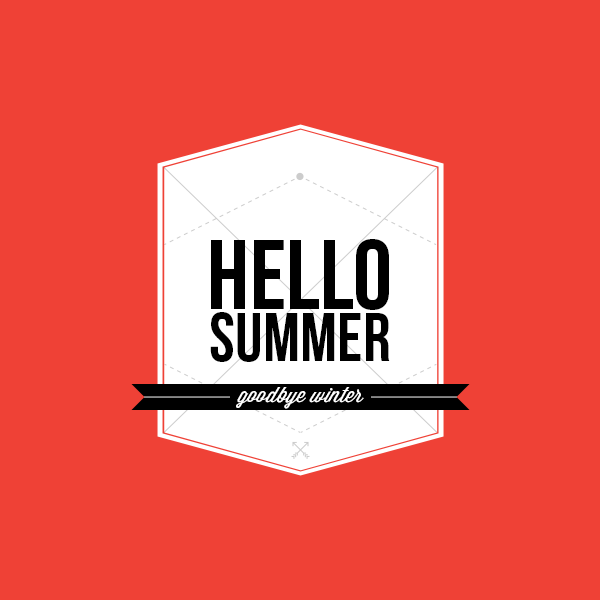
<style>
.page{position:relative;width:600px;height:600px;background:#ef4136}
.page>*{position:absolute;margin:0}
.t1{font:99px "BebasNeue";color:#000000}
.t2{font:69px "BebasNeue";color:#000000}
.t3{font:21px "WisdomScriptAI";color:#ffffff}
</style>
<div class="page">
<p class="t1" style="left:211px;top:239px;width:178px;height:71px">HELLO</p>
<p class="t2" style="left:210px;top:312px;width:180px;height:50px">SUMMER</p>
<p class="t3" style="left:236px;top:387px;width:128px;height:22px">goodbye winter</p>
</div>
